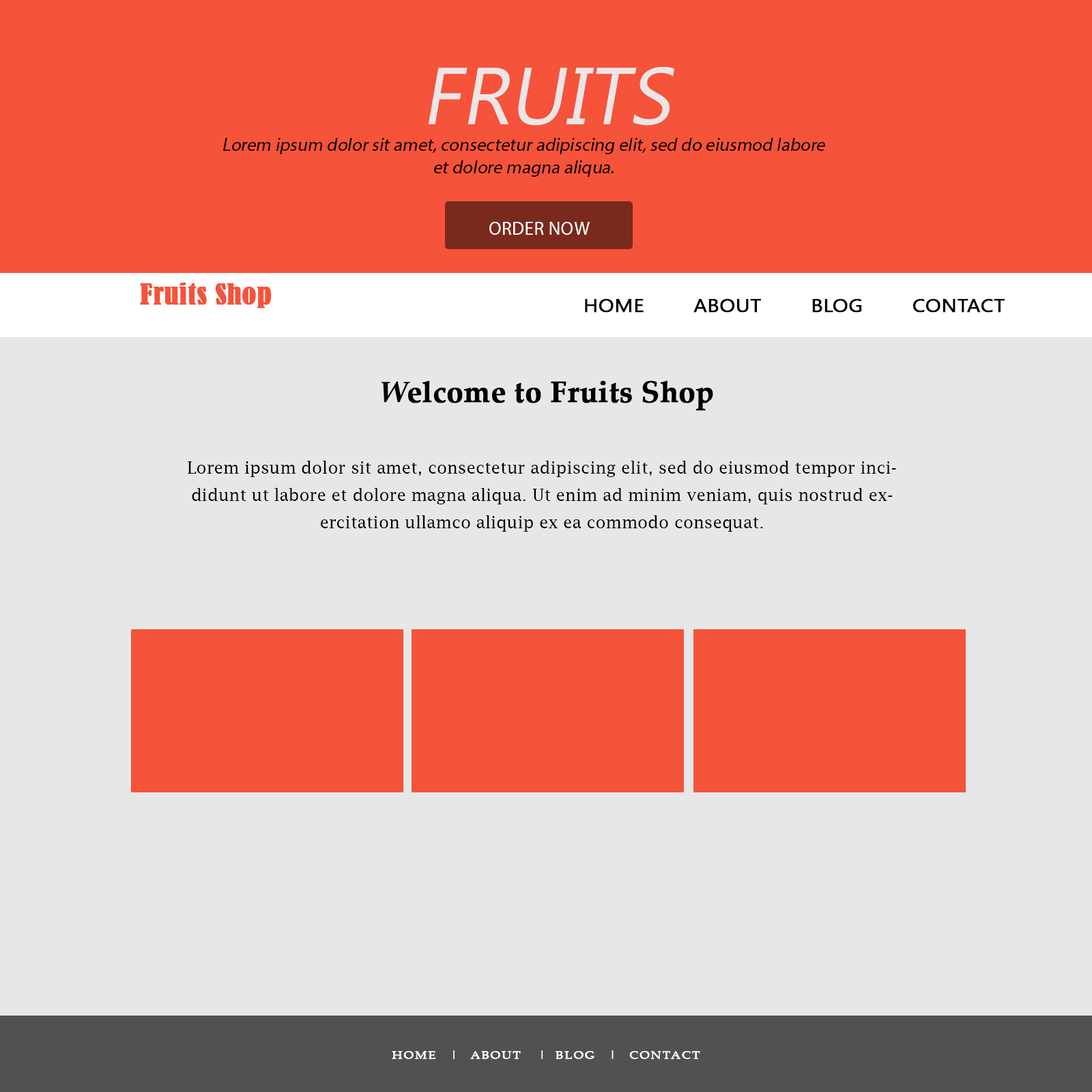
<style>
.page{position:relative;width:1092px;height:1092px;background:#e7e7e7}
.page>*{position:absolute;margin:0}
.t1{font:80.5px "MyanmarText";color:#ece6e6;text-transform:uppercase;font-style:italic}
.t2{font:18.4px "MyriadPro-Regular";color:#000000;font-style:italic}
.t3{font:18.4px "MyriadPro-Regular";color:#ffffff;text-transform:uppercase}
.t4{font:26.4px "BernardMT-Condensed";color:#f5533a;font-weight:bold;scale:1.11 1}
.t5{font:18.4px "NirmalaUI";color:#000000;text-transform:uppercase;font-weight:bold;scale:1.11 1}
.t6{font:29.3px "PalatinoLinotype-Bold";color:#010101;font-weight:bold}
.t7{font:29.3px "PalatinoLinotype-Bold";color:#010101;text-transform:uppercase;font-style:italic}
.t8{font:16.4px/27.3px "LucidaFax";color:#000000}
.t9{font:15.7px/27.3px "LucidaFax";color:#000000}
.t10{font:11.1px "PalatinoLinotype-Roman";color:#ffffff;text-transform:uppercase;font-weight:bold;scale:1.11 1}
</style>
<div class="page">
<p class="t1" style="left:428px;top:67px;width:246px;height:59px">Fruits</p>
<p class="t2" style="left:223px;top:138px;width:602px;height:39px;text-align:center">Lorem ipsum dolor sit amet, consectetur adipiscing elit, sed do eiusmod labore et dolore magna aliqua.</p>
<p class="t3" style="left:489px;top:222px;width:101px;height:13px">Order Now</p>
<p class="t4" style="left:140px;top:283px;width:132px;height:25px">Fruits Shop</p>
<p class="t5" style="left:585px;top:299px;width:420px;height:14px">Home        About        blog        contact</p>
<p class="t6" style="left:382px;top:381px;width:331px;height:30px"><span class="t7">W</span>elcome to Fruits Shop</p>
<p class="t8" style="left:188px;top:461px;width:708px;height:71px;text-align:center"><span class="t9"><br></span>Lorem ipsum dolor sit amet, consectetur adipiscing elit, sed do eiusmod tempor incididunt ut labore et dolore magna aliqua. Ut enim ad minim veniam, quis nostrud exercitation ullamco aliquip ex ea commodo consequat.</p>
<p class="t10" style="left:392px;top:1050px;width:308px;height:9px">Home    |    About     |   blog    |    contact</p>
</div>
